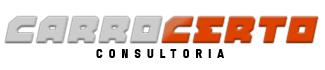
<style>
.page{position:relative;width:325px;height:70px;background:#ffffff}
.page>*{position:absolute;margin:0}
.t1{font:26.1px "BotCraftShop";letter-spacing:0.075em;color:#cccccc}
.t2{font:26.1px "BotCraftShop";letter-spacing:0.075em;color:#de4200}
.t3{font:12.9px "The27Club";letter-spacing:0.5em;color:#000000}
</style>
<div class="page">
<p class="t1" style="left:5px;top:16px;width:313px;height:27px">CARRO<span class="t2">CERTO</span></p>
<p class="t3" style="left:96px;top:49px;width:128px;height:9px">Consultoria</p>
</div>
